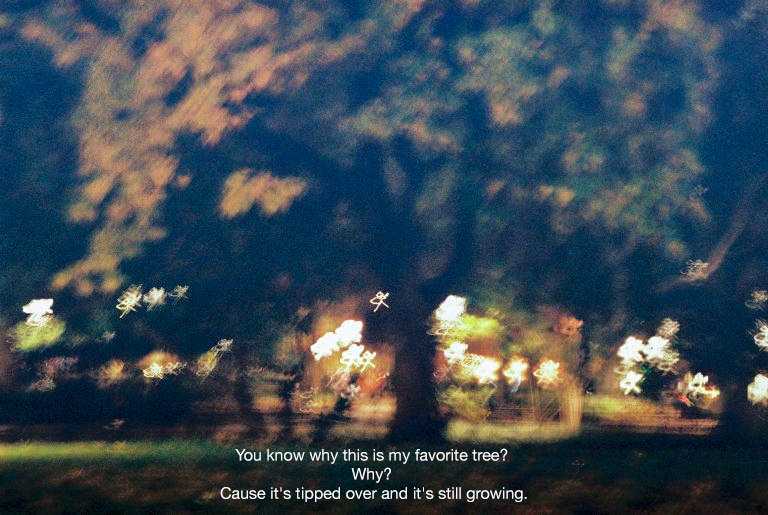
<style>
.page{position:relative;width:768px;height:515px}
.page>*{position:absolute;margin:0}
.t1{font:16px "HelveticaNeue";color:#ffffff}
</style>
<div class="page">
<p class="t1" style="left:220px;top:448px;width:307px;height:54px;text-align:center">You know why this is my favorite tree? <br>Why? <br>Cause it's tipped over and it's still growing.</p>
</div>
